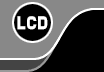
<style>
.page{position:relative;width:104px;height:72px;background:#000000}
.page>*{position:absolute;margin:0}
.t1{font:18.4px "MaximusCondensed-Bold";color:#ffffff;scale:1.34 1}
</style>
<div class="page">
<p class="t1" style="left:17px;top:16px;width:31px;height:14px">LCD</p>
</div>
